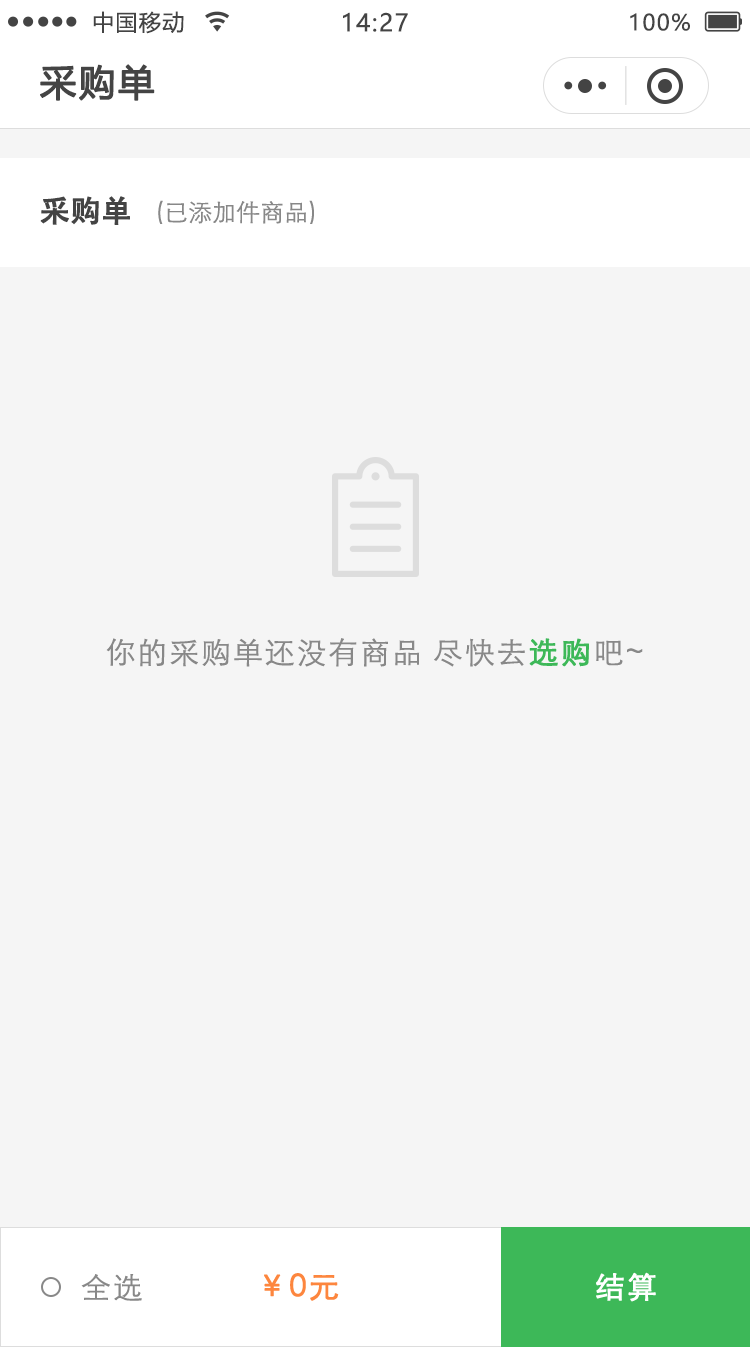
<style>
.page{position:relative;width:750px;height:1347px;background:#f5f5f5}
.page>*{position:absolute;margin:0}
.t1{font:22px "MicrosoftYaHei";letter-spacing:0.06em;color:#444444}
.t2{font:24px "MicrosoftYaHei";letter-spacing:0.06em;color:#444444}
.t3{font:36px "MicrosoftYaHei";letter-spacing:0.06em;color:#444444;font-weight:bold}
.t4{font:30px "AdobeHeitiStd-Regular";color:#444444;font-weight:bold}
.t5{font:24px "STXihei";color:#888888}
.t6{font:30px "STXihei";letter-spacing:0.06em;color:#888888}
.t7{font:30px "STXihei";letter-spacing:0.06em;color:#3db858;font-weight:bold}
.t8{font:30px "STXihei";letter-spacing:0.06em;color:#fd863e;font-weight:bold}
.t9{font:29.9px "STXihei";letter-spacing:0.06em;color:#ffffff;font-weight:bold}
</style>
<div class="page">
<p class="t1" style="left:93px;top:11px;width:91px;height:23px">中国移动</p>
<p class="t2" style="left:343px;top:12px;width:65px;height:20px">14:27</p>
<p class="t1" style="left:630px;top:13px;width:60px;height:18px">100%</p>
<p class="t3" style="left:40px;top:64px;width:115px;height:37px">采购单</p>
<p class="t4" style="left:40px;top:196px;width:90px;height:29px">采购单</p>
<p class="t5" style="left:158px;top:200px;width:156px;height:24px">(已添加件商品)</p>
<p class="t6" style="left:106px;top:638px;width:537px;height:29px">你的采购单还没有商品 尽快去<span class="t7">选购</span>吧~</p>
<p class="t6" style="left:81px;top:1274px;width:61px;height:27px">全选</p>
<p class="t8" style="left:264px;top:1273px;width:75px;height:28px">￥0元</p>
<p class="t9" style="left:596px;top:1272px;width:60px;height:30px">结算</p>
</div>
